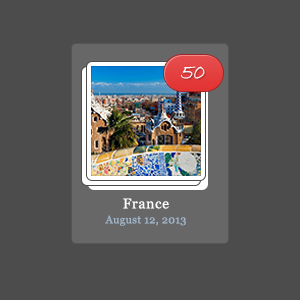
<style>
.page{position:relative;width:300px;height:300px;background:#4c4c4c}
.page>*{position:absolute;margin:0}
.t1{font:21.8px "BradleyHandITC";color:#ffffff}
.t2{font:14px "Vani";letter-spacing:0.05em;color:#ffffff}
.t3{font:11px "Vani";letter-spacing:0.025em;color:#a2b8cd}
</style>
<div class="page">
<p class="t1" style="left:181px;top:66px;width:24px;height:13px">50</p>
<p class="t2" style="left:123px;top:198px;width:46px;height:11px">France</p>
<p class="t3" style="left:105px;top:215px;width:81px;height:11px">August 12, 2013</p>
</div>
